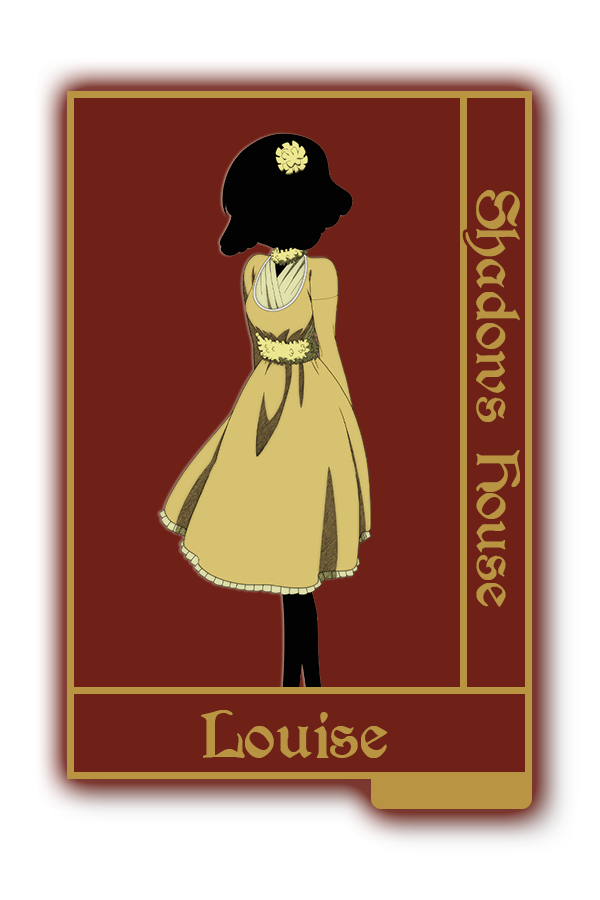
<style>
.page{position:relative;width:600px;height:900px;background:#6f2117}
.page>*{position:absolute;margin:0}
.t1{font:67.9px "Augusta-Regular";color:#b89443}
.t2{font:75px "Augusta-Regular";color:#b89443}
</style>
<div class="page">
<p class="t1" style="left:465px;top:190px;width:55px;height:417px;rotate:90deg">Shadows House</p>
<p class="t2" style="left:201px;top:710px;width:187px;height:48px">Louise</p>
</div>
